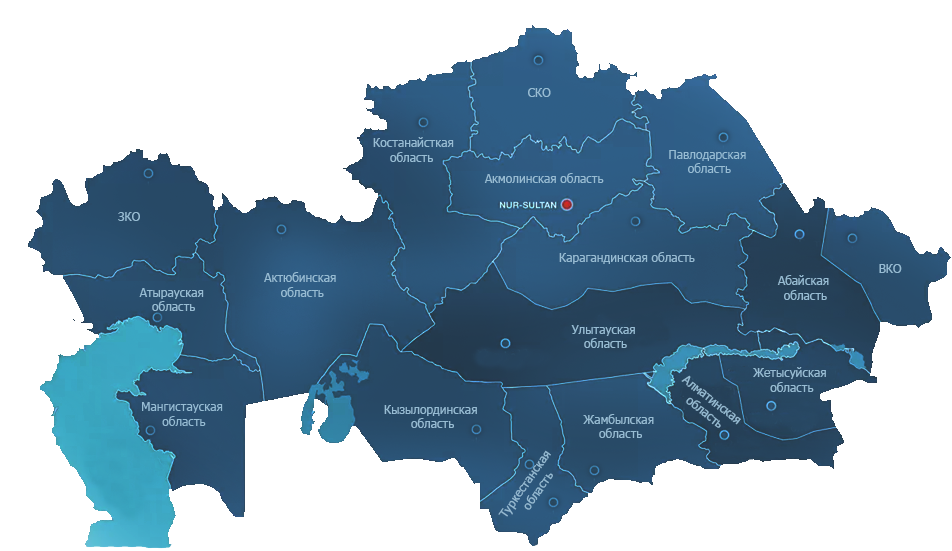
<style>
.page{position:relative;width:952px;height:551px;background:#ffffff}
.page>*{position:absolute;margin:0}
.t1{font:12px "Tahoma";color:#97bcd3}
</style>
<div class="page">
<p class="t1" style="left:528px;top:88px;width:23px;height:9px">СКО</p>
<p class="t1" style="left:373px;top:137px;width:81px;height:25px;text-align:center">Костанайсткая<br>область</p>
<p class="t1" style="left:484px;top:173px;width:120px;height:10px">Акмолинская область</p>
<p class="t1" style="left:118px;top:212px;width:22px;height:9px">ЗКО</p>
<p class="t1" style="left:559px;top:252px;width:136px;height:12px">Карагандинская область</p>
<p class="t1" style="left:879px;top:264px;width:23px;height:9px">ВКО</p>
<p class="t1" style="left:264px;top:272px;width:72px;height:25px;text-align:center">Актюбинская <br>область</p>
<p class="t1" style="left:777px;top:275px;width:52px;height:25px;text-align:center">Абайская <br>область</p>
<p class="t1" style="left:139px;top:288px;width:65px;height:23px;text-align:center">Атырауская <br>область</p>
<p class="t1" style="left:571px;top:325px;width:64px;height:23px;text-align:center">Улытауская <br>область</p>
<p class="t1" style="left:681px;top:375px;width:60px;height:53px;text-align:center;rotate:38deg">Алматинская <br>область</p>
<p class="t1" style="left:753px;top:367px;width:73px;height:25px;text-align:center">Жетысуйская <br>область</p>
<p class="t1" style="left:384px;top:405px;width:93px;height:23px;text-align:center">Кызылординская <br>область</p>
<p class="t1" style="left:583px;top:414px;width:71px;height:24px;text-align:center">Жамбылская <br>область</p>
<p class="t1" style="left:498px;top:450px;width:55px;height:67px;text-align:center;rotate:-55deg">Туркестанская <br>область</p>
</div>
